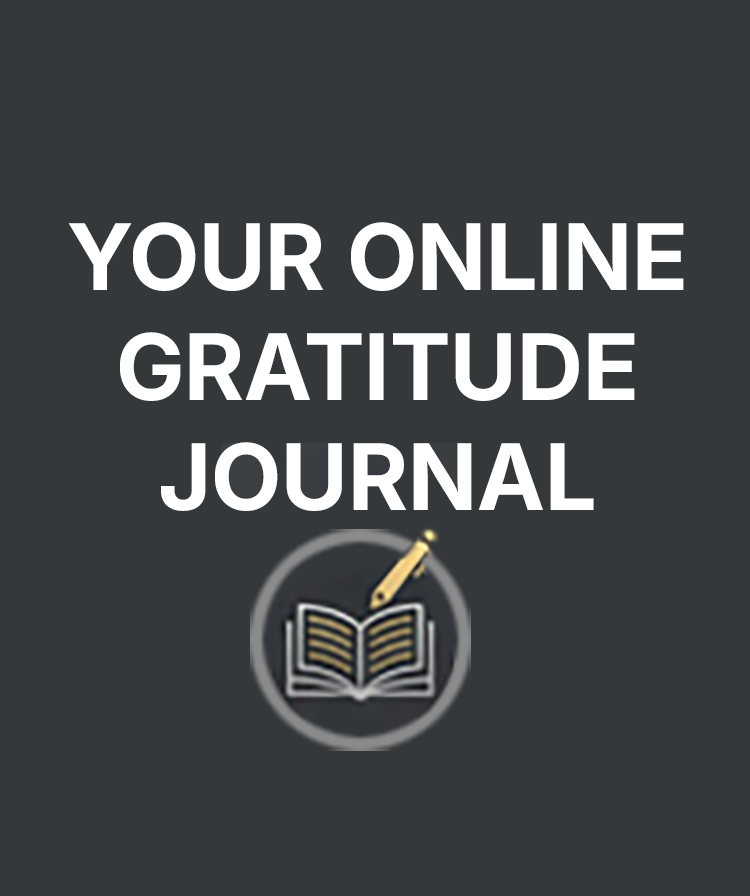
<style>
.page{position:relative;width:750px;height:896px;background:#35383b}
.page>*{position:absolute;margin:0}
.t1{font:91.7px "Inter18pt-Bold";color:#ffffff}
</style>
<div class="page">
<p class="t1" style="left:68px;top:222px;width:616px;height:289px;text-align:center">YOUR ONLINE GRATITUDE JOURNAL</p>
</div>
